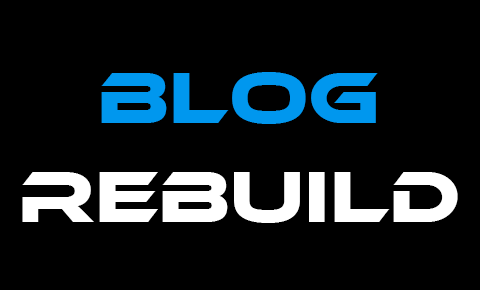
<style>
.page{position:relative;width:480px;height:290px;background:#000000}
.page>*{position:absolute;margin:0}
.t1{font:75px "EthnocentricRg-Regular";color:#0097ee}
.t2{font:75px "EthnocentricRg-Regular";color:#ffffff}
</style>
<div class="page">
<p class="t1" style="left:101px;top:72px;width:277px;height:52px">blog</p>
<p class="t2" style="left:22px;top:172px;width:436px;height:51px">rebuild</p>
</div>
